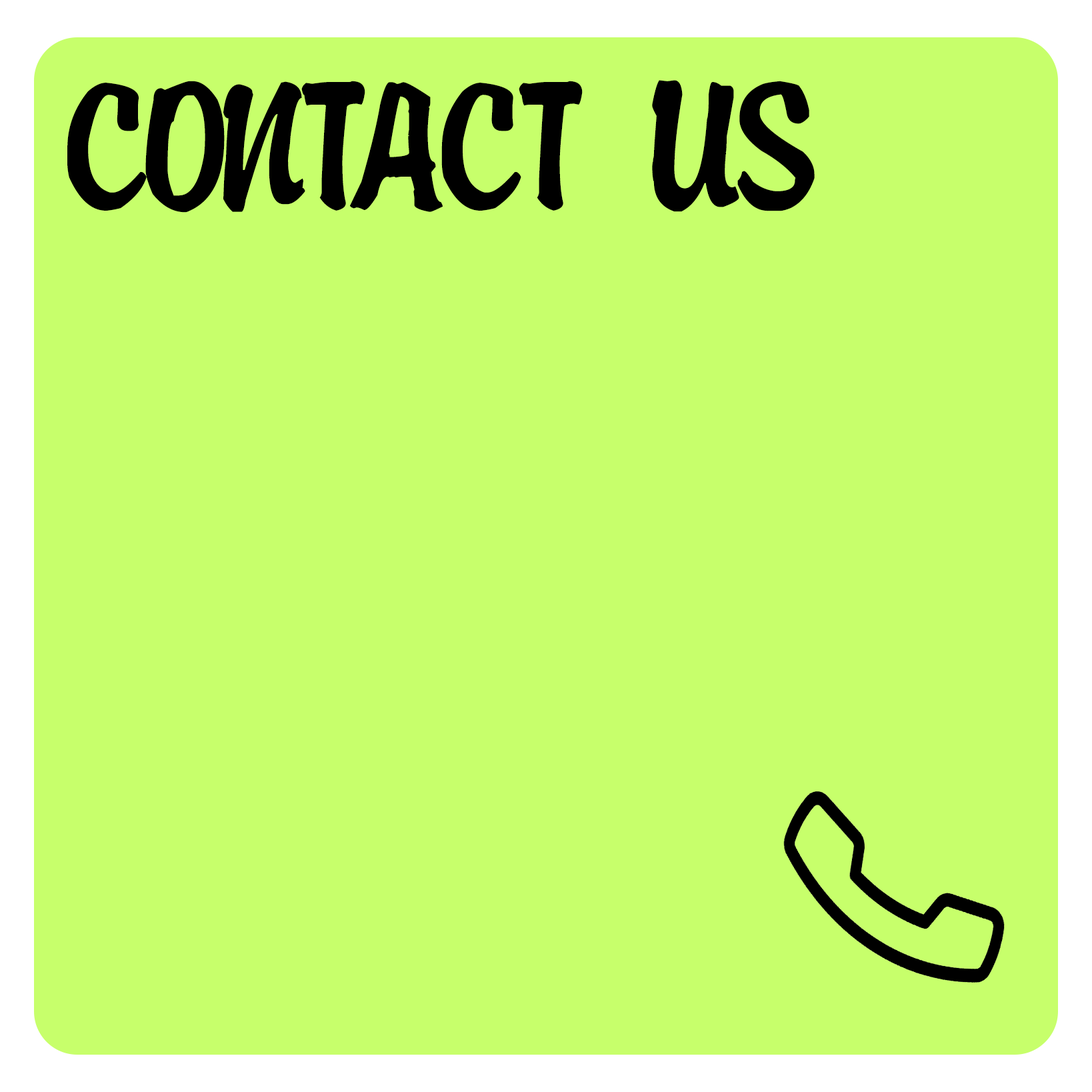
<style>
.page{position:relative;width:1092px;height:1092px;background:#c7ff6b}
.page>*{position:absolute;margin:0}
.t1{font:182.6px "Fixthephoto---Buke";letter-spacing:-0.01em;color:#000000}
</style>
<div class="page">
<p class="t1" style="left:67px;top:80px;width:748px;height:133px">CONTACT US</p>
</div>
